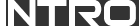
<style>
.page{position:relative;width:139px;height:26px;background:#ffffff}
.page>*{position:absolute;margin:0}
.t1{font:50px "Bitsumishi";color:#ffffff}
</style>
<div class="page">
<p class="t1" style="left:0px;top:0px;width:136px;height:26px">Intro</p>
</div>
